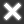
<style>
.page{position:relative;width:24px;height:24px;background:#333333}
.page>*{position:absolute;margin:0}
.t1{font:36px "Ebrima-Bold";color:#ffffff}
</style>
<div class="page">
<p class="t1" style="left:4px;top:3px;width:17px;height:17px">×</p>
</div>
